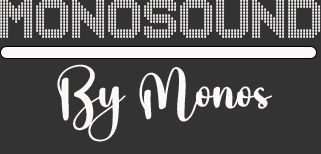
<style>
.page{position:relative;width:321px;height:154px;background:#333333}
.page>*{position:absolute;margin:0}
.t1{font:48px "MUSICNET";color:#fdf8f8}
.t2{font:48px "AuthorRegular";color:#fdf8f8}
</style>
<div class="page">
<p class="t1" style="left:0px;top:0px;width:321px;height:38px">MONOSOUND</p>
<p class="t2" style="left:57px;top:64px;width:216px;height:78px">By Monos</p>
</div>
